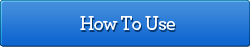
<style>
.page{position:relative;width:250px;height:47px}
.page>*{position:absolute;margin:0}
.t1{font:20px "Archer-Semibold";letter-spacing:-0.05em;color:#ffffff}
</style>
<div class="page">
<p class="t1" style="left:80px;top:16px;width:95px;height:14px">How To Use</p>
</div>
